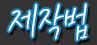
<style>
.page{position:relative;width:97px;height:45px;background:#333333}
.page>*{position:absolute;margin:0}
.t1{font:46.7px "KCC-eunyoung-Regular";color:#ffffff}
</style>
<div class="page">
<p class="t1" style="left:8px;top:3px;width:79px;height:38px">제작법</p>
</div>
